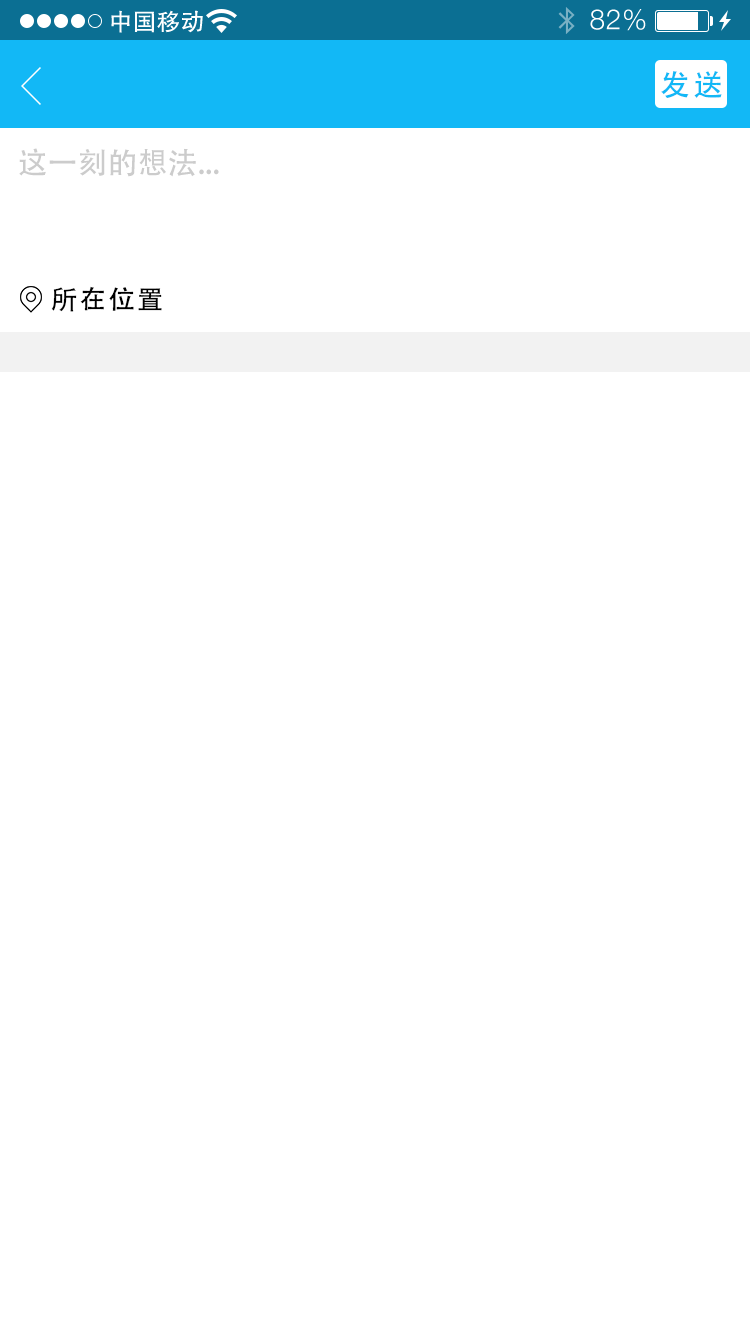
<style>
.page{position:relative;width:750px;height:1334px;background:#ffffff}
.page>*{position:absolute;margin:0}
.t1{font:30px "AdobeHeitiStd-Regular";letter-spacing:0.104em;color:#12b8f6}
.t2{font:30px "AdobeHeitiStd-Regular";color:#cccccc}
.t3{font:26px "AdobeHeitiStd-Regular";letter-spacing:0.104em;color:#000000}
</style>
<div class="page">
<p class="t1" style="left:661px;top:71px;width:61px;height:27px">发送</p>
<p class="t2" style="left:19px;top:148px;width:200px;height:29px">这一刻的想法...</p>
<p class="t3" style="left:51px;top:286px;width:111px;height:26px">所在位置</p>
</div>
